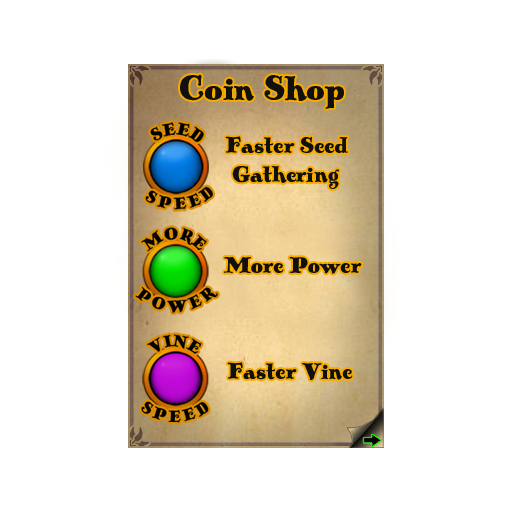
<style>
.page{position:relative;width:512px;height:512px;background:#ffffff}
.page>*{position:absolute;margin:0}
.t1{font:36px "PickworthOldStylePro";color:#101010}
.t2{font:24px "PickworthOldStylePro";color:#101010}
</style>
<div class="page">
<p class="t1" style="left:180px;top:74px;width:164px;height:35px">Coin Shop</p>
<p class="t2" style="left:225px;top:136px;width:123px;height:53px">Faster Seed<br> Gathering</p>
<p class="t2" style="left:224px;top:257px;width:138px;height:17px">More Power</p>
<p class="t2" style="left:227px;top:362px;width:126px;height:18px">Faster Vine</p>
</div>
